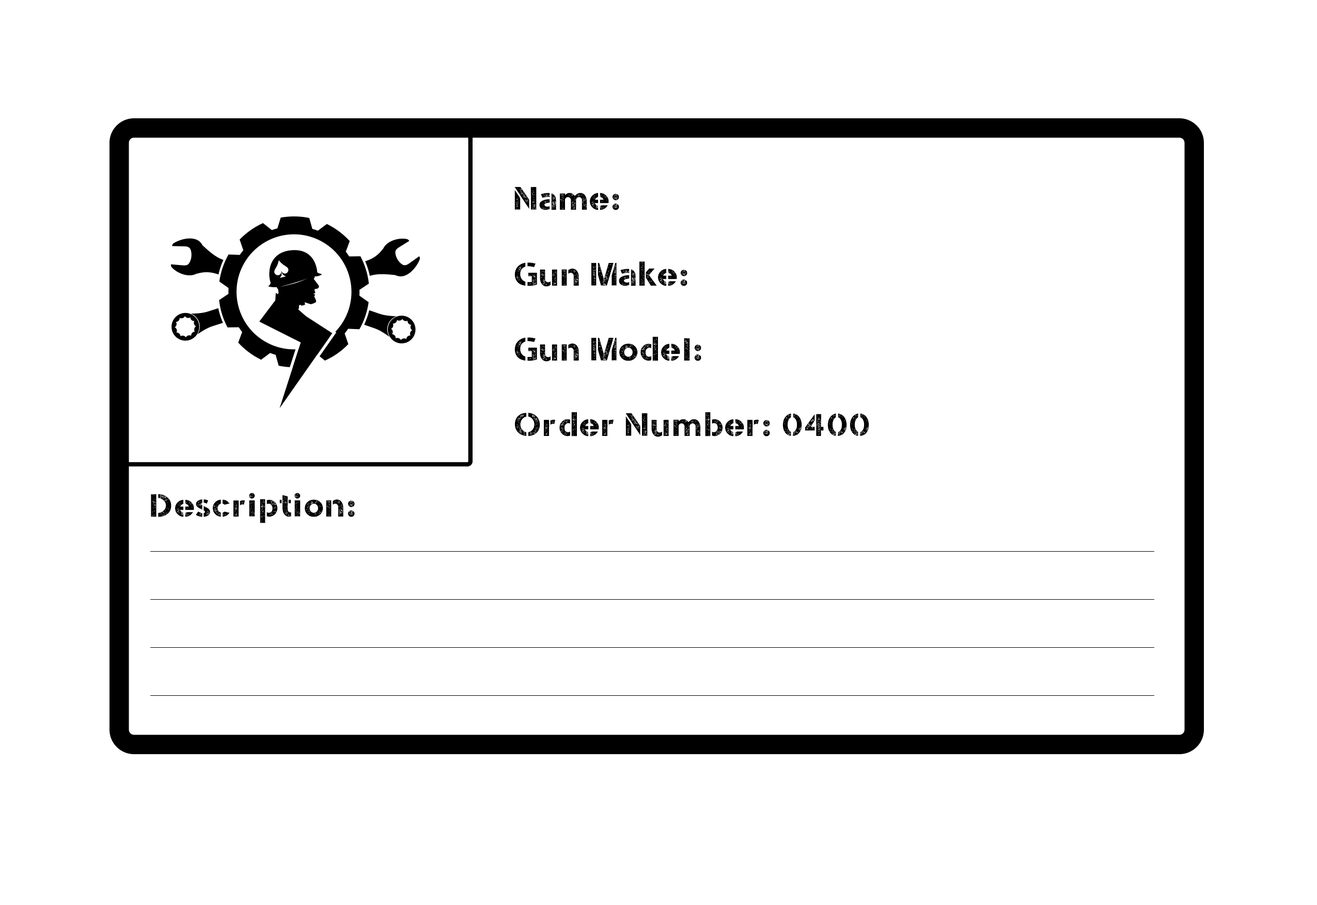
<style>
.page{position:relative;width:1317px;height:905px;background:#ffffff}
.page>*{position:absolute;margin:0}
.t1{font:32.3px "StencilArmyWWI";letter-spacing:0.02em;color:#000000}
</style>
<div class="page">
<p class="t1" style="left:515px;top:187px;width:104px;height:23px">Name:</p>
<p class="t1" style="left:515px;top:261px;width:173px;height:26px">Gun Make:</p>
<p class="t1" style="left:515px;top:337px;width:187px;height:25px">Gun Model:</p>
<p class="t1" style="left:515px;top:412px;width:354px;height:25px">Order Number: 0400</p>
<p class="t1" style="left:151px;top:493px;width:204px;height:30px">Description:</p>
</div>
